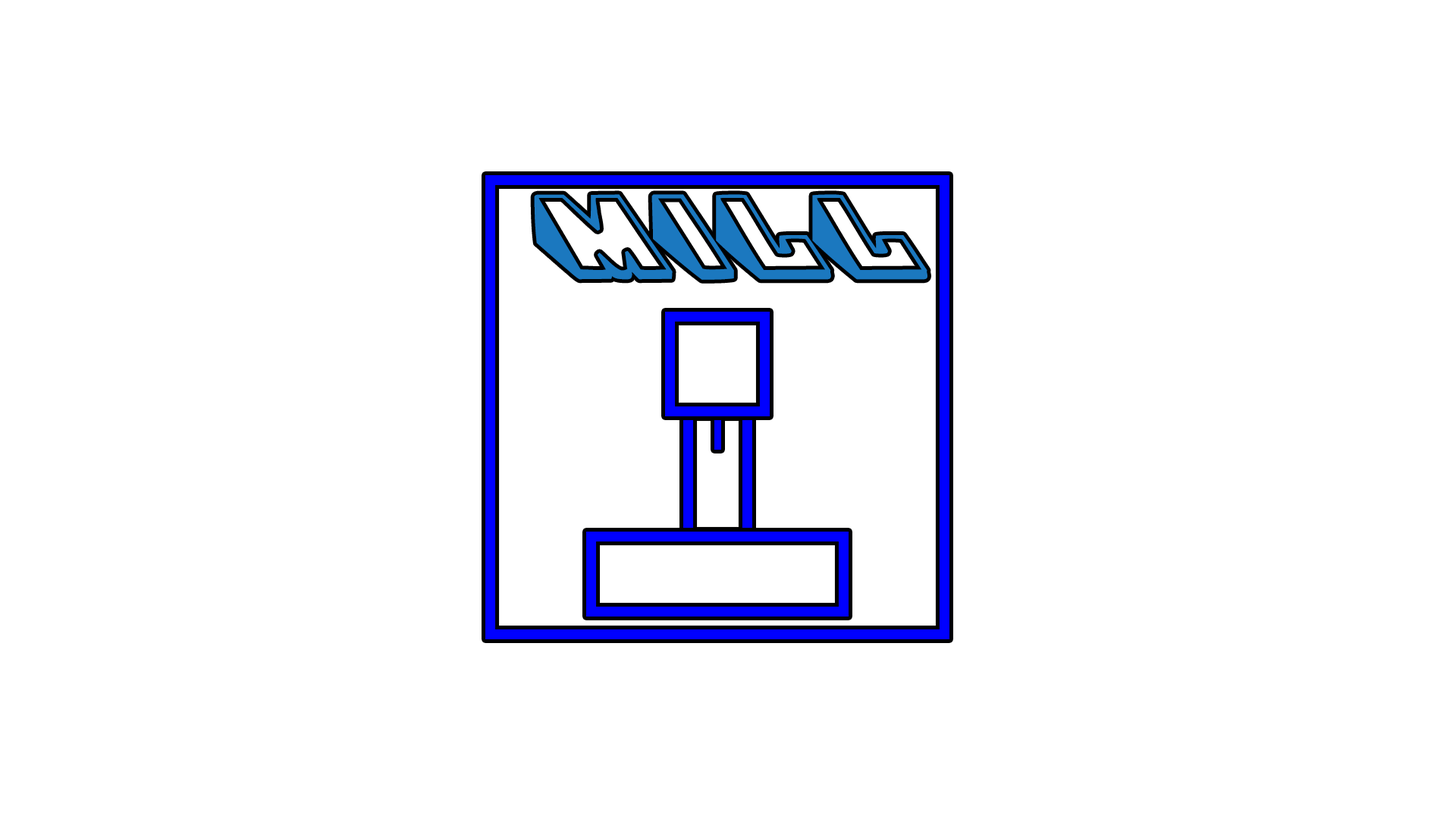
<style>
.page{position:relative;width:1456px;height:819px;background:#ffffff}
.page>*{position:absolute;margin:0}
.t1{font:98.3px "Wedgie-Regular";color:#1b78bf;text-transform:uppercase;font-weight:bold}
</style>
<div class="page">
<p class="t1" style="left:534px;top:194px;width:393px;height:86px">Mill</p>
</div>
